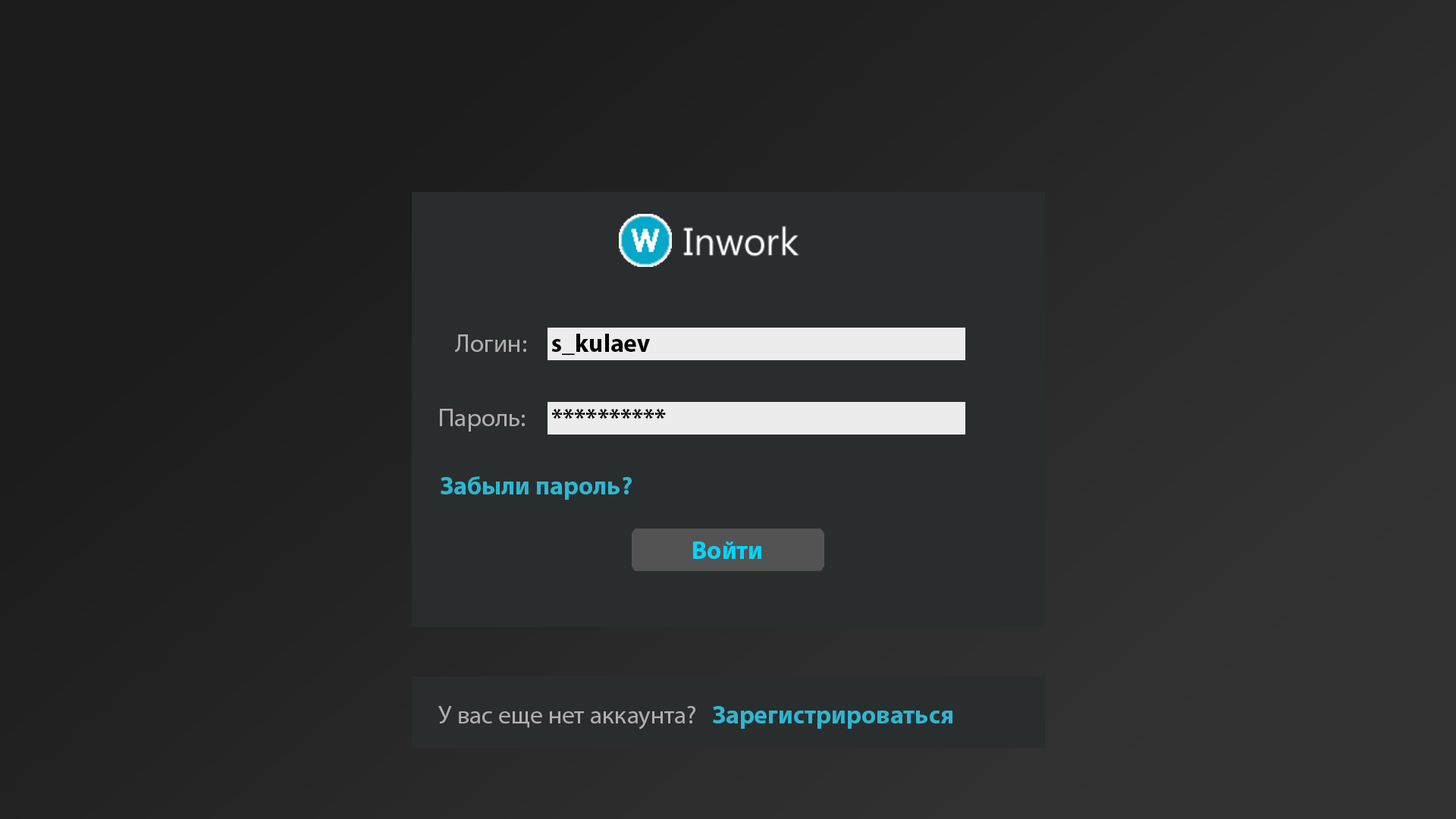
<style>
.page{position:relative;width:1456px;height:819px;background:#2a2d2e}
.page>*{position:absolute;margin:0}
.t1{font:25.3px "MyriadPro-Regular";color:#b1aeae}
.t2{font:25.3px "MyriadPro-Bold";color:#010101}
.t3{font:25.3px "MyriadPro-Bold";color:#2fb6d1}
.t4{font:25.3px "MyriadPro-Bold";color:#01d5ff}
</style>
<div class="page">
<p class="t1" style="left:455px;top:334px;width:71px;height:18px">Логин:</p>
<p class="t2" style="left:551px;top:334px;width:99px;height:21px">s_kulaev</p>
<p class="t1" style="left:440px;top:409px;width:85px;height:22px">Пароль:</p>
<p class="t2" style="left:552px;top:409px;width:114px;height:10px">**********</p>
<p class="t3" style="left:441px;top:476px;width:191px;height:24px">Забыли пароль?</p>
<p class="t4" style="left:693px;top:541px;width:68px;height:18px">Войти</p>
<p class="t1" style="left:438px;top:706px;width:257px;height:24px">У вас еще нет аккаунта?</p>
<p class="t3" style="left:713px;top:706px;width:239px;height:23px">Зарегистрироваться</p>
</div>
